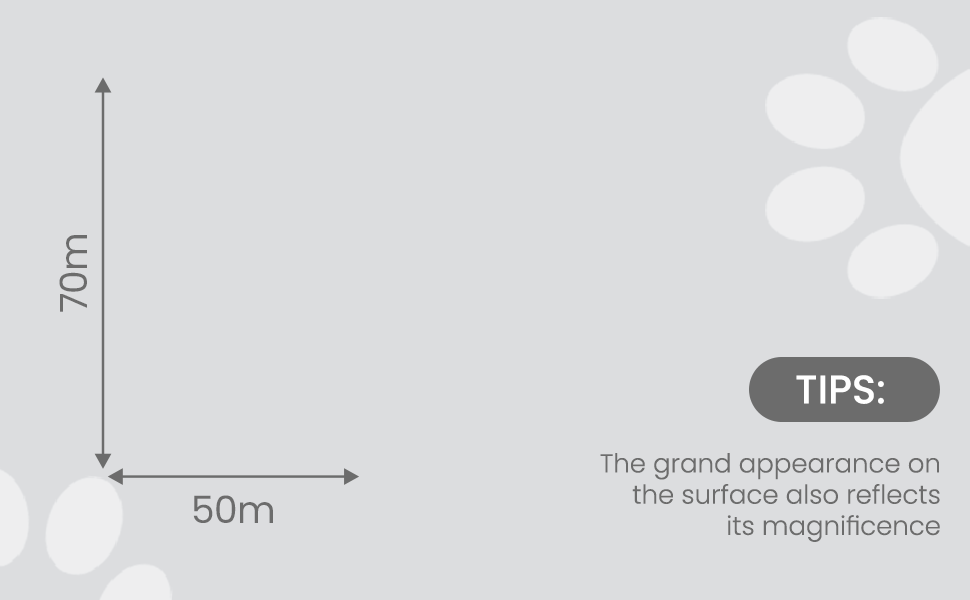
<style>
.page{position:relative;width:970px;height:600px;background:#dcdddf}
.page>*{position:absolute;margin:0}
.t1{font:37.5px "Poppins-Regular";color:#6c6c6c}
.t2{font:40px "Poppins-Medium";color:#ffffff;text-transform:uppercase}
.t3{font:26px "Poppins-Light";color:#6c6c6c}
</style>
<div class="page">
<p class="t1" style="left:59px;top:235px;width:28px;height:77px;rotate:-90deg">70m</p>
<p class="t2" style="left:796px;top:375px;width:88px;height:29px">TIPS:</p>
<p class="t3" style="left:600px;top:453px;width:340px;height:89px;text-align:right">The grand appearance on<br> the surface also reflects<br>its magnificence</p>
<p class="t1" style="left:193px;top:495px;width:80px;height:28px">50m</p>
</div>
